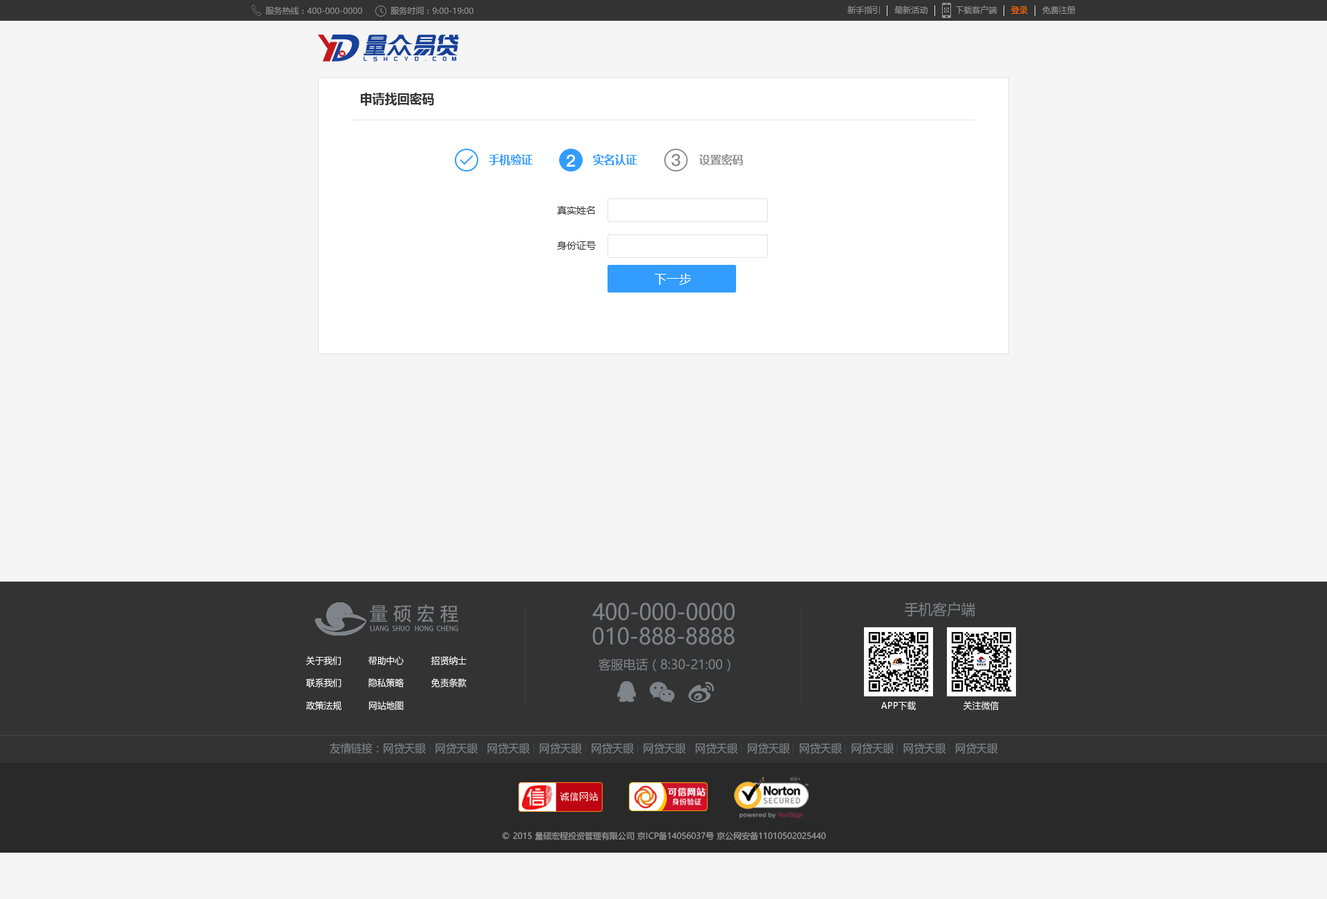
<style>
.page{position:relative;width:1327px;height:899px;background:#f5f5f5}
.page>*{position:absolute;margin:0}
.t1{font:8.3px "MicrosoftYaHei";color:#909090}
.t2{font:8.3px "MicrosoftYaHei";color:#ff6803}
.t3{font:12.4px "MicrosoftYaHei-Bold";color:#333333}
.t4{font:11.1px "MicrosoftYaHei-Bold";color:#329dff}
.t5{font:16.6px "PingFang-SC-Heavy";color:#ffffff}
.t6{font:16.6px "PingFang-SC-Heavy";color:#909090}
.t7{font:11.1px "MicrosoftYaHei-Bold";color:#909090}
.t8{font:9.7px "MicrosoftYaHei";color:#333333}
.t9{font:12.4px "MicrosoftYaHei";color:#ffffff}
.t10{font:19.6px "AdobeHeitiStd-Regular";letter-spacing:0.2em;color:#7f848a}
.t11{font:22.1px "MicrosoftYaHei";color:#7f848a;scale:0.96 1}
.t12{font:14.7px "MicrosoftYaHei";color:#7f848a;scale:0.96 1}
.t13{font:7px "AdobeHeitiStd-Regular";color:#7f848a;text-transform:uppercase;scale:0.96 1}
.t14{font:9.2px "MicrosoftYaHei";color:#ffffff;scale:0.96 1}
.t15{font:12.9px "MicrosoftYaHei";color:#7f848a;scale:0.96 1}
.t16{font:11px "MicrosoftYaHei";color:#7f848a;scale:0.96 1}
.t17{font:8.3px "MicrosoftYaHei";color:#999999}
</style>
<div class="page">
<p class="t1" style="left:847px;top:6px;width:33px;height:8px">新手指引</p>
<p class="t1" style="left:894px;top:6px;width:34px;height:8px">最新活动</p>
<p class="t1" style="left:955px;top:6px;width:42px;height:8px">下载客户端</p>
<p class="t1" style="left:265px;top:7px;width:97px;height:8px">服务热线：400-000-0000</p>
<p class="t1" style="left:391px;top:7px;width:82px;height:8px">服务时间：9:00-19:00</p>
<p class="t2" style="left:1011px;top:6px;width:17px;height:8px">登录</p>
<p class="t1" style="left:1042px;top:6px;width:33px;height:8px">免费注册</p>
<p class="t3" style="left:361px;top:93px;width:73px;height:13px">申请找回密码</p>
<p class="t4" style="left:489px;top:154px;width:44px;height:11px">手机验证</p>
<p class="t5" style="left:566px;top:154px;width:9px;height:13px">2</p>
<p class="t4" style="left:593px;top:154px;width:44px;height:11px">实名认证</p>
<p class="t6" style="left:671px;top:153px;width:10px;height:14px">3</p>
<p class="t7" style="left:699px;top:154px;width:44px;height:11px">设置密码</p>
<p class="t8" style="left:557px;top:206px;width:38px;height:8px">真实姓名</p>
<p class="t8" style="left:557px;top:241px;width:39px;height:9px">身份证号</p>
<p class="t9" style="left:654px;top:273px;width:37px;height:12px">下一步</p>
<p class="t10" style="left:370px;top:604px;width:88px;height:18px">量硕宏程</p>
<p class="t11" style="left:592px;top:602px;width:143px;height:18px">400-000-0000</p>
<p class="t12" style="left:905px;top:601px;width:70px;height:16px">手机客户端</p>
<p class="t13" style="left:370px;top:625px;width:88px;height:6px">Liang  Shuo   Hong  Cheng</p>
<p class="t11" style="left:592px;top:627px;width:143px;height:18px">010-888-8888</p>
<p class="t14" style="left:306px;top:656px;width:35px;height:9px">关于我们</p>
<p class="t14" style="left:368px;top:656px;width:36px;height:9px">帮助中心</p>
<p class="t14" style="left:431px;top:655px;width:36px;height:10px">招贤纳士</p>
<p class="t15" style="left:599px;top:658px;width:132px;height:13px">客服电话（8:30-21:00）</p>
<p class="t14" style="left:306px;top:678px;width:35px;height:9px">联系我们</p>
<p class="t14" style="left:368px;top:678px;width:36px;height:9px">隐私策略</p>
<p class="t14" style="left:431px;top:678px;width:36px;height:9px">免责条款</p>
<p class="t14" style="left:306px;top:701px;width:35px;height:9px">政策法规</p>
<p class="t14" style="left:369px;top:701px;width:35px;height:9px">网站地图</p>
<p class="t14" style="left:881px;top:701px;width:35px;height:9px">APP下载</p>
<p class="t14" style="left:964px;top:701px;width:35px;height:9px">关注微信</p>
<p class="t16" style="left:330px;top:742px;width:668px;height:11px">友情链接：网贷天眼   网贷天眼   网贷天眼   网贷天眼   网贷天眼   网贷天眼   网贷天眼   网贷天眼   网贷天眼   网贷天眼   网贷天眼   网贷天眼</p>
<p class="t17" style="left:502px;top:831px;width:324px;height:9px">© 2015 量硕宏程投资管理有限公司 京ICP备14056037号 京公网安备11010502025440</p>
</div>
